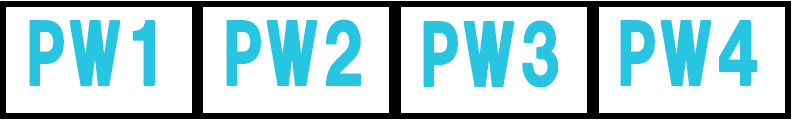
<style>
.page{position:relative;width:792px;height:120px;background:#ffffff}
.page>*{position:absolute;margin:0}
.t1{font:79px "HGSSoeiKakugothicUB";letter-spacing:0.03em;color:#27c5e2;font-weight:bold;scale:0.89 1}
</style>
<div class="page">
<p class="t1" style="left:29px;top:20px;width:126px;height:66px">PW1</p>
<p class="t1" style="left:226px;top:19px;width:135px;height:67px">PW2</p>
<p class="t1" style="left:423px;top:20px;width:136px;height:68px">PW3</p>
<p class="t1" style="left:620px;top:20px;width:138px;height:66px">PW4</p>
</div>
